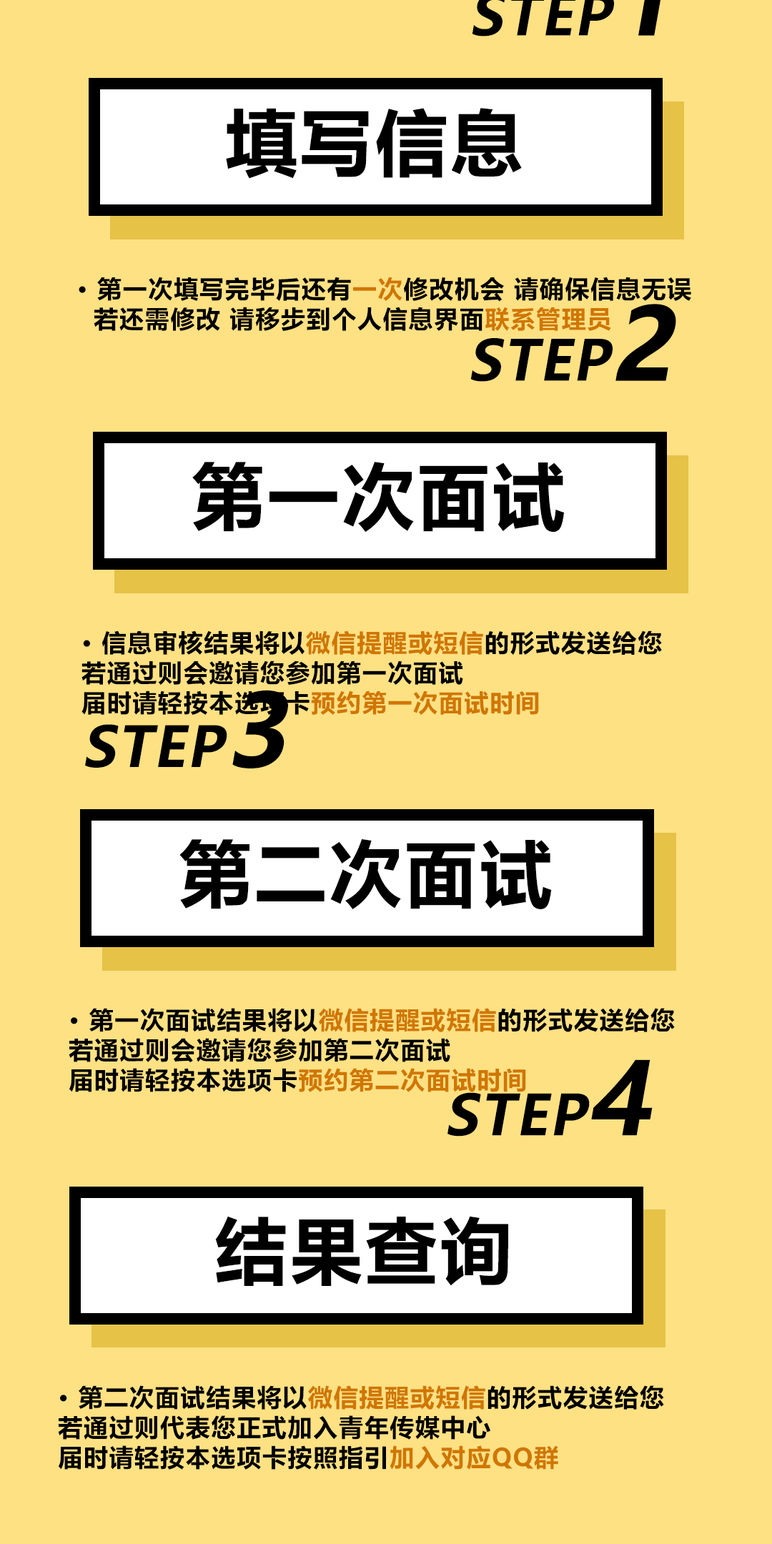
<style>
.page{position:relative;width:772px;height:1544px;background:#fee183}
.page>*{position:absolute;margin:0}
.t1{font:71.6px "MicrosoftYaHei-Bold";letter-spacing:0.05em;color:#000000}
.t2{font:24.3px/30px "MicrosoftYaHei-Bold";letter-spacing:0.05em;color:#000000}
.t3{font:24.3px/30px "MicrosoftYaHei-Bold";letter-spacing:0.05em;color:#d07600}
.t4{font:55.4px "MicrosoftYaHei-Bold";letter-spacing:0.03em;color:#000000;font-style:italic}
.t5{font:99.5px "MicrosoftYaHei-Bold";letter-spacing:0.03em;color:#000000;font-style:italic}
</style>
<div class="page">
<p class="t1" style="left:226px;top:108px;width:296px;height:71px">填写信息</p>
<p class="t2" style="left:79px;top:277px;width:612px;height:54px">· 第一次填写完毕后还有<span class="t3">一次</span>修改机会 请确保信息无误<br>  若还需修改 请移步到个人信息界面<span class="t3">联系管理员</span></p>
<p class="t4" style="left:470px;top:304px;width:206px;height:78px">STEP<span class="t5">2</span></p>
<p class="t1" style="left:192px;top:462px;width:372px;height:70px">第一次面试</p>
<p class="t2" style="left:82px;top:631px;width:580px;height:84px">· 信息审核结果将以<span class="t3">微信提醒或短信</span>的形式发送给您<br>若通过则会邀请您参加第一次面试<br>届时请轻按本选项卡<span class="t3">预约第一次面试时间</span></p>
<p class="t4" style="left:85px;top:690px;width:203px;height:79px">STEP<span class="t5">3</span></p>
<p class="t1" style="left:179px;top:839px;width:373px;height:70px">第二次面试</p>
<p class="t2" style="left:69px;top:1008px;width:606px;height:84px">· 第一次面试结果将以<span class="t3">微信提醒或短信</span>的形式发送给您<br>若通过则会邀请您参加第二次面试<br>届时请轻按本选项卡<span class="t3">预约第二次面试时间</span></p>
<p class="t4" style="left:448px;top:1060px;width:205px;height:77px">STEP<span class="t5">4</span></p>
<p class="t1" style="left:215px;top:1216px;width:293px;height:70px">结果查询</p>
<p class="t2" style="left:58px;top:1386px;width:606px;height:84px">· 第二次面试结果将以<span class="t3">微信提醒或短信</span>的形式发送给您<br>若通过则代表您正式加入青年传媒中心<br>届时请轻按本选项卡按照指引<span class="t3">加入对应QQ群</span></p>
</div>
